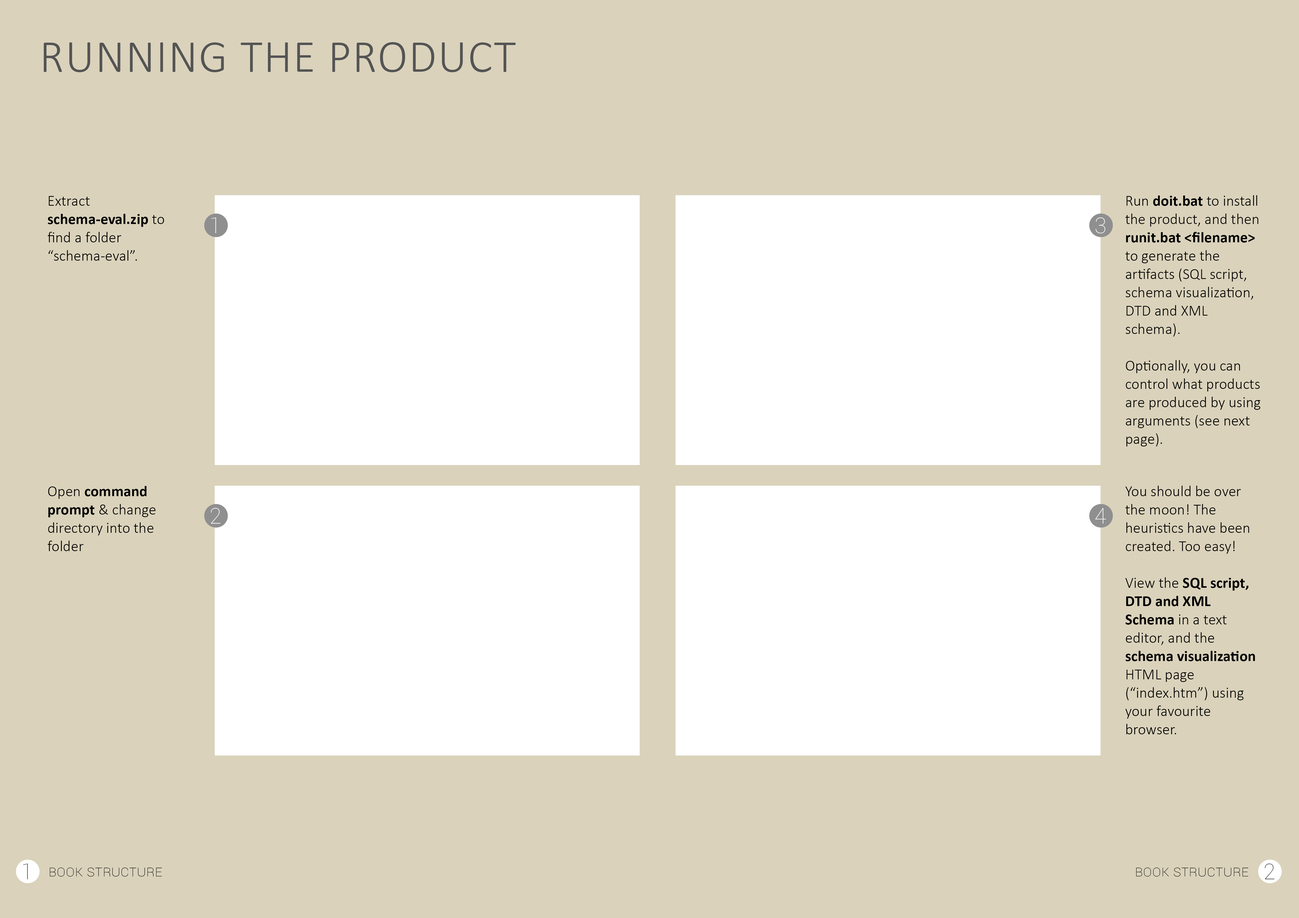
<style>
.page{position:relative;width:1299px;height:918px;background:#dad2bb}
.page>*{position:absolute;margin:0}
.t1{font:45.8px "Calibri-Light";letter-spacing:0.025em;color:#545454;text-transform:uppercase}
.t2{font:15.3px "Calibri-Light";color:#000000}
.t3{font:15.3px "Calibri-Bold";color:#000000}
.t4{font:21.8px "Roboto-Thin";color:#ffffff}
.t5{font:21.8px "Roboto-Thin";color:#484848}
.t6{font:15.3px "Roboto-Thin";color:#000000;font-variant:small-caps}
</style>
<div class="page">
<p class="t1" style="left:44px;top:42px;width:472px;height:30px">Running the product</p>
<p class="t2" style="left:48px;top:196px;width:116px;height:65px">Extract <span class="t3">schema-eval.zip</span> to find a folder “schema-eval”.</p>
<p class="t2" style="left:1125px;top:195px;width:135px;height:252px">Run <span class="t3">doit.bat</span> to install the product, and then <span class="t3">runit.bat &lt;filename&gt;</span> to generate the artifacts (SQL script, schema visualization, DTD and XML schema). <br><br>Optionally, you can control what products are produced by using arguments (see next page).</p>
<p class="t4" style="left:211px;top:218px;width:5px;height:15px">1</p>
<p class="t4" style="left:1095px;top:217px;width:10px;height:16px">3</p>
<p class="t2" style="left:1125px;top:486px;width:130px;height:248px">You should be over the moon! The heuristics have been created. Too easy! <br><br>View the <span class="t3">SQL script, DTD and XML Schema</span> in a text editor, and the <span class="t3">schema visualization </span>HTML page (“index.htm”) using your favourite browser.</p>
<p class="t2" style="left:48px;top:486px;width:107px;height:65px">Open <span class="t3">command prompt </span>&amp; change directory into the folder</p>
<p class="t4" style="left:211px;top:508px;width:9px;height:16px">2</p>
<p class="t4" style="left:1095px;top:508px;width:11px;height:16px">4</p>
<p class="t5" style="left:23px;top:864px;width:5px;height:16px">1</p>
<p class="t6" style="left:50px;top:868px;width:112px;height:9px">Book structure</p>
<p class="t6" style="left:1136px;top:868px;width:112px;height:9px">Book structure</p>
<p class="t5" style="left:1264px;top:864px;width:10px;height:16px">2</p>
</div>
